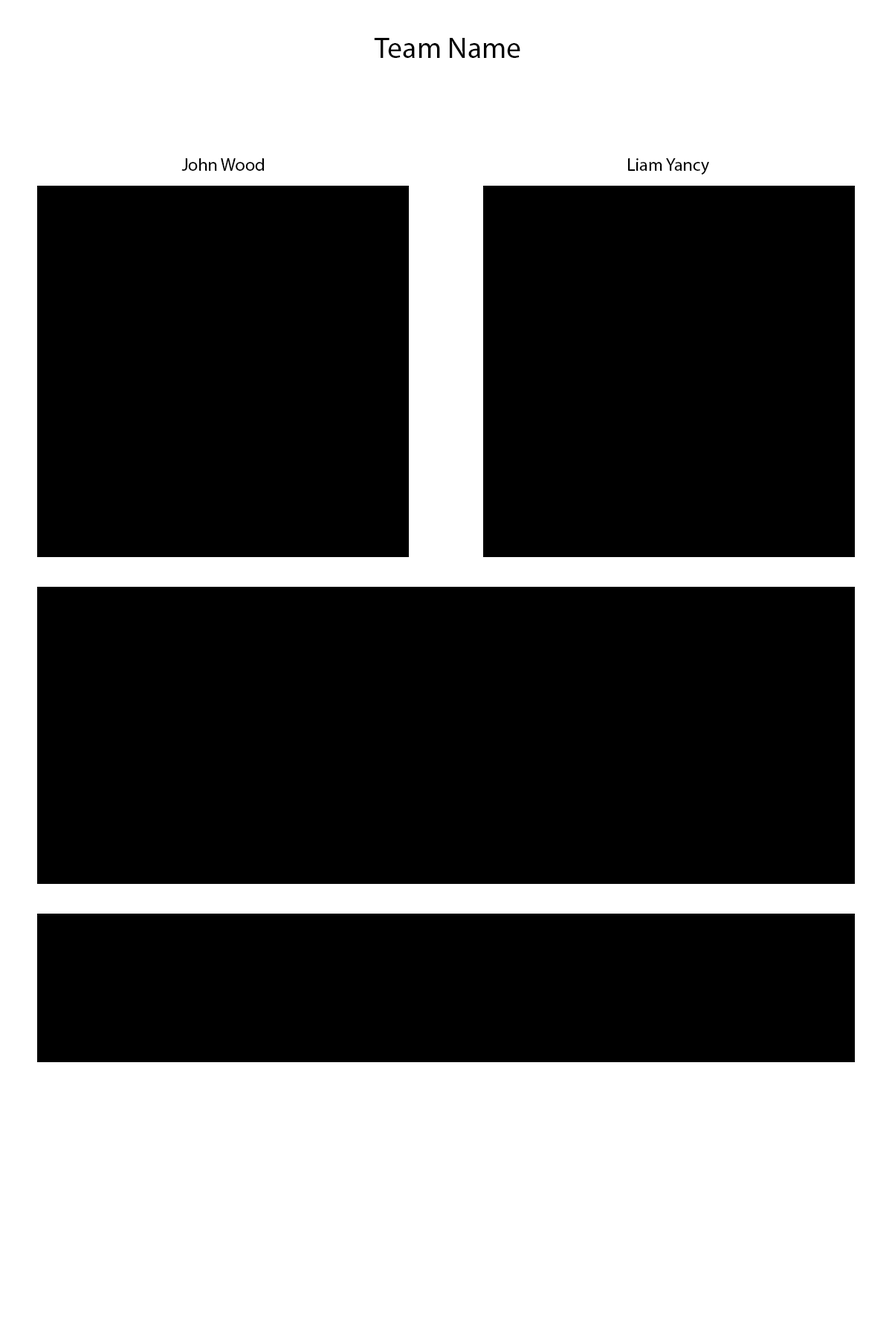
<style>
.page{position:relative;width:892px;height:1337px;background:#000000}
.page>*{position:absolute;margin:0}
.t1{font:29.7px "MyriadPro-Regular";color:#000000}
.t2{font:17.8px "MyriadPro-Regular";color:#000000}
</style>
<div class="page">
<p class="t1" style="left:374px;top:38px;width:146px;height:20px">Team Name</p>
<p class="t2" style="left:181px;top:158px;width:83px;height:13px">John Wood</p>
<p class="t2" style="left:628px;top:158px;width:81px;height:17px">Liam Yancy</p>
</div>
